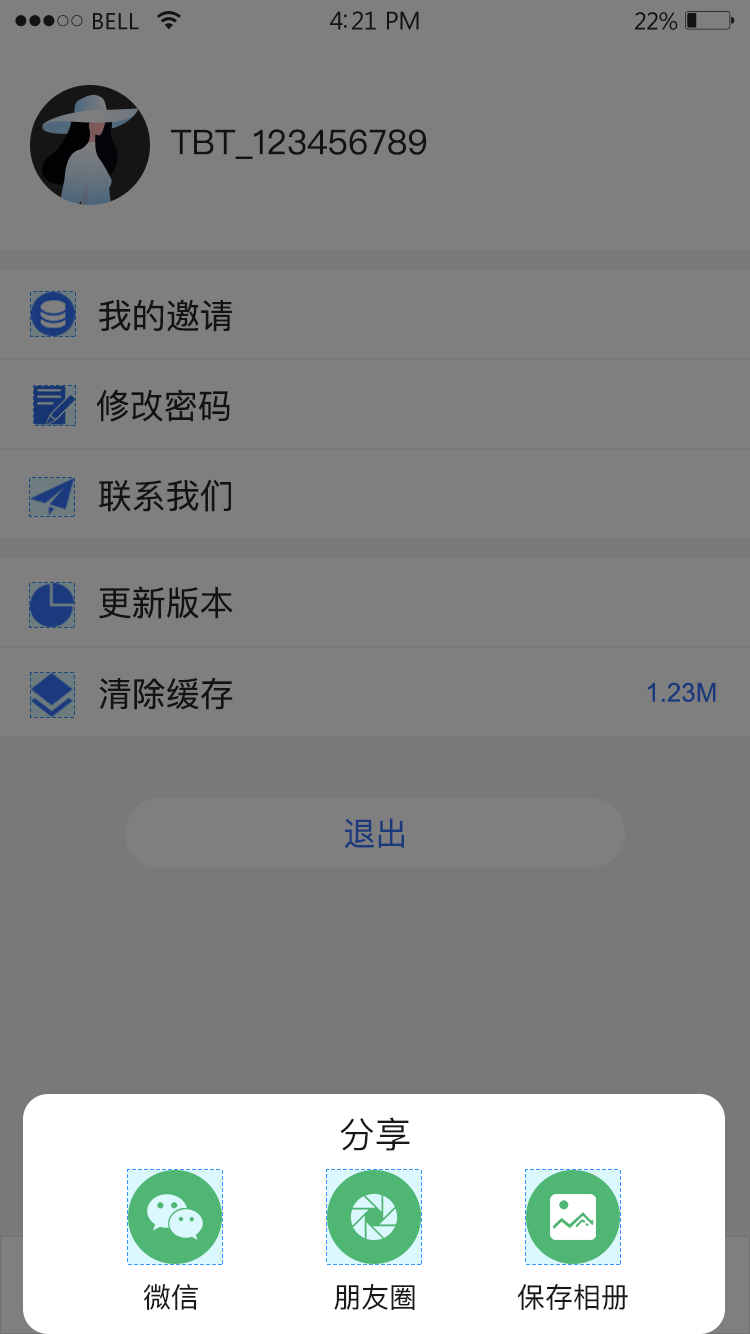
<style>
.page{position:relative;width:750px;height:1334px;background:#7f7f7f}
.page>*{position:absolute;margin:0}
.t1{font:34px "PingFangSC-Regular";color:#262626}
.t2{font:26px "ArialMT";color:#1a3a7d}
.t3{font:32px "PingFangSC-Regular";color:#1a3a7d}
.t4{font:36px "PingFangSC-Regular";color:#181818}
.t5{font:28px "PingFangSC-Regular";color:#181818}
</style>
<div class="page">
<p class="t1" style="left:171px;top:129px;width:256px;height:30px">TBT_123456789</p>
<p class="t1" style="left:99px;top:299px;width:134px;height:33px">我的邀请</p>
<p class="t1" style="left:96px;top:389px;width:134px;height:33px">修改密码</p>
<p class="t1" style="left:99px;top:479px;width:132px;height:33px">联系我们</p>
<p class="t1" style="left:99px;top:586px;width:134px;height:33px">更新版本</p>
<p class="t1" style="left:99px;top:677px;width:134px;height:33px">清除缓存</p>
<p class="t2" style="left:647px;top:682px;width:69px;height:20px">1.23M</p>
<p class="t3" style="left:345px;top:818px;width:59px;height:31px">退出</p>
<p class="t4" style="left:340px;top:1117px;width:70px;height:34px">分享</p>
<p class="t5" style="left:144px;top:1284px;width:54px;height:26px">微信</p>
<p class="t5" style="left:334px;top:1284px;width:81px;height:26px">朋友圈</p>
<p class="t5" style="left:517px;top:1284px;width:111px;height:26px">保存相册</p>
</div>
